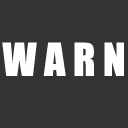
<style>
.page{position:relative;width:128px;height:128px;background:#333333}
.page>*{position:absolute;margin:0}
.t1{font:42px "Impact";color:#ffffff}
</style>
<div class="page">
<p class="t1" style="left:2px;top:42px;width:122px;height:34px">W A R N</p>
</div>
